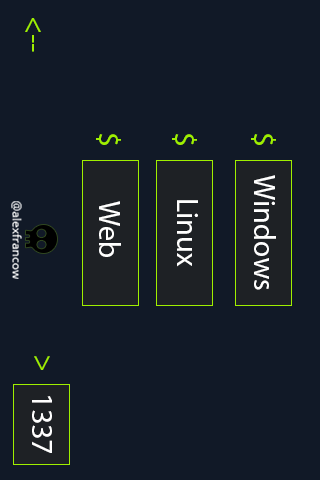
<style>
.page{position:relative;width:320px;height:480px;background:#111927}
.page>*{position:absolute;margin:0}
.t1{font:30px "MyriadPro-Regular";color:#9fef00}
.t2{font:30px "MyriadPro-Regular";color:#ffffff}
.t3{font:12px "OpenSans-Regular";color:#ffffff}
</style>
<div class="page">
<p class="t1" style="left:25px;top:18px;width:16px;height:34px;rotate:90deg">&lt;--</p>
<p class="t1" style="left:96px;top:134px;width:25px;height:11px;rotate:90deg">$</p>
<p class="t1" style="left:172px;top:134px;width:25px;height:11px;rotate:90deg">$</p>
<p class="t1" style="left:251px;top:134px;width:25px;height:11px;rotate:90deg">$</p>
<p class="t2" style="left:254px;top:175px;width:22px;height:115px;rotate:90deg">Windows</p>
<p class="t3" style="left:11px;top:201px;width:11px;height:78px;rotate:90deg">@alexfrancow</p>
<p class="t2" style="left:99px;top:201px;width:22px;height:56px;rotate:90deg">Web</p>
<p class="t2" style="left:177px;top:200px;width:21px;height:67px;rotate:90deg">Linux</p>
<p class="t1" style="left:34px;top:356px;width:16px;height:14px;rotate:90deg">&gt;</p>
<p class="t2" style="left:32px;top:396px;width:20px;height:57px;rotate:90deg">1337</p>
</div>
